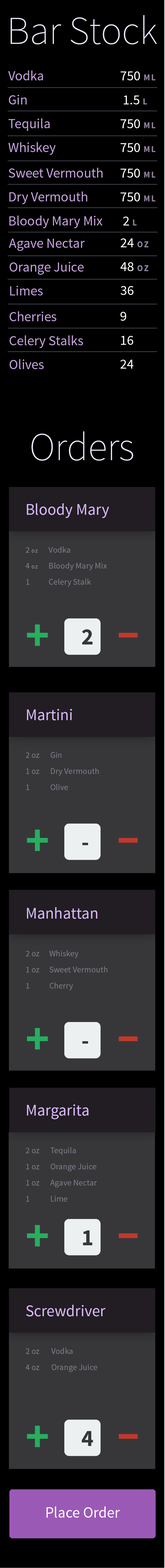
<style>
.page{position:relative;width:165px;height:1568px;background:#000000}
.page>*{position:absolute;margin:0}
.t1{font:39.8px "SourceSansPro-ExtraLight";color:#ece8fc}
.t2{font:13.9px/23.9px "SourceSansPro-Regular";color:#c3a1db}
.t3{font:13.9px/23.9px "SourceSansPro-Regular";color:#ffffff}
.t4{font:8.8px/23.9px "SourceSansPro-Bold";letter-spacing:0.135em;color:#90819b;text-transform:uppercase}
.t5{font:16.1px "SourceSansPro-Regular";color:#dbb9f9}
.t6{font:4.7px/16.1px "SourceSansPro-Bold";letter-spacing:0.135em;color:#807d89;text-transform:uppercase}
.t7{font:8.6px/16.1px "SourceSansPro-Regular";color:#807d89}
.t8{font:45.3px "SourceSansPro-Bold";letter-spacing:0.05em;color:#27ae60}
.t9{font:23.1px "SourceSansPro-Bold";letter-spacing:0.05em;color:#37373a}
.t10{font:45.3px "SourceSansPro-Bold";letter-spacing:0.05em;color:#c0392b;scale:1.7 1}
.t11{font:15.5px "SourceSansPro-Regular";color:#ffffff}
</style>
<div class="page">
<p class="t1" style="left:11px;top:15px;width:147px;height:29px">Bar Stock</p>
<p class="t2" style="left:8px;top:70px;width:48px;height:85px">Vodka<br>Gin<br>Tequila<br>Whiskey</p>
<p class="t3" style="left:121px;top:71px;width:35px;height:81px">750 <span class="t4">ml<br></span> 1.5 <span class="t4">L<br></span>750 <span class="t4">ML<br></span>750 <span class="t4">ml</span></p>
<p class="t2" style="left:9px;top:168px;width:94px;height:60px">Sweet Vermouth<br>Dry Vermouth<br>Bloody Mary Mix</p>
<p class="t3" style="left:121px;top:169px;width:35px;height:56px">750 <span class="t4">ml<br></span>750 <span class="t4">ml<br></span> 2 <span class="t4">l</span></p>
<p class="t2" style="left:9px;top:239px;width:76px;height:56px">Agave Nectar<br>Orange Juice<br>Limes</p>
<p class="t3" style="left:121px;top:238px;width:28px;height:57px">24 <span class="t4">oz<br></span>48 <span class="t4">oz<br></span>36</p>
<p class="t2" style="left:10px;top:311px;width:73px;height:58px">Cherries<br>Celery Stalks<br>Olives</p>
<p class="t3" style="left:121px;top:312px;width:13px;height:57px">9<br>16<br>24</p>
<p class="t1" style="left:32px;top:431px;width:102px;height:30px">Orders</p>
<p class="t5" style="left:27px;top:503px;width:82px;height:15px">Bloody Mary</p>
<p class="t6" style="left:26px;top:547px;width:12px;height:38px"><span class="t7">2 </span>oz <br><span class="t7">4 </span>oz<br><span class="t7">1</span></p>
<p class="t7" style="left:49px;top:546px;width:58px;height:40px">Vodka<br>Bloody Mary Mix<br>Celery Stalk</p>
<p class="t8" style="left:27px;top:624px;width:21px;height:22px">+</p>
<p class="t9" style="left:82px;top:629px;width:11px;height:15px">2</p>
<p class="t10" style="left:119px;top:633px;width:19px;height:5px">-</p>
<p class="t5" style="left:27px;top:709px;width:45px;height:11px">Martini</p>
<p class="t7" style="left:26px;top:752px;width:13px;height:38px">2 oz <br>1 oz<br>1</p>
<p class="t7" style="left:51px;top:752px;width:48px;height:38px">Gin<br>Dry Vermouth<br>Olive</p>
<p class="t8" style="left:27px;top:830px;width:21px;height:21px">+</p>
<p class="t9" style="left:83px;top:843px;width:5px;height:2px">-</p>
<p class="t10" style="left:119px;top:838px;width:19px;height:5px">-</p>
<p class="t5" style="left:27px;top:907px;width:71px;height:12px">Manhattan</p>
<p class="t7" style="left:26px;top:951px;width:13px;height:38px">2 oz <br>1 oz<br>1</p>
<p class="t7" style="left:49px;top:950px;width:59px;height:40px">Whiskey<br>Sweet Vermouth<br>Cherry</p>
<p class="t8" style="left:27px;top:1028px;width:21px;height:22px">+</p>
<p class="t10" style="left:119px;top:1036px;width:19px;height:5px">-</p>
<p class="t9" style="left:83px;top:1041px;width:5px;height:3px">-</p>
<p class="t5" style="left:27px;top:1104px;width:62px;height:15px">Margarita</p>
<p class="t7" style="left:26px;top:1148px;width:13px;height:54px">2 oz <br>1 oz<br>1 oz<br>1</p>
<p class="t7" style="left:50px;top:1147px;width:47px;height:55px">Tequila<br>Orange Juice<br>Agave Nectar<br>Lime</p>
<p class="t8" style="left:27px;top:1225px;width:21px;height:22px">+</p>
<p class="t9" style="left:83px;top:1230px;width:10px;height:15px">1</p>
<p class="t10" style="left:119px;top:1233px;width:19px;height:5px">-</p>
<p class="t5" style="left:26px;top:1305px;width:80px;height:11px">Screwdriver</p>
<p class="t7" style="left:26px;top:1348px;width:13px;height:22px">2 oz <br>4 oz</p>
<p class="t7" style="left:51px;top:1348px;width:46px;height:24px">Vodka<br>Orange Juice</p>
<p class="t8" style="left:27px;top:1426px;width:21px;height:21px">+</p>
<p class="t9" style="left:82px;top:1431px;width:11px;height:15px">4</p>
<p class="t10" style="left:119px;top:1434px;width:19px;height:5px">-</p>
<p class="t11" style="left:47px;top:1506px;width:73px;height:12px">Place Order</p>
</div>
